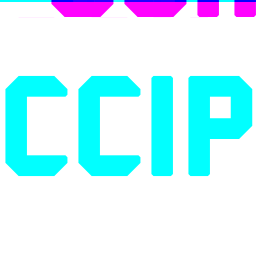
<style>
.page{position:relative;width:256px;height:256px;background:#ffffff}
.page>*{position:absolute;margin:0}
.t1{font:150px "Bombardier";color:#01ffff;font-weight:bold}
</style>
<div class="page">
<p class="t1" style="left:5px;top:73px;width:248px;height:102px">CCIP</p>
</div>
